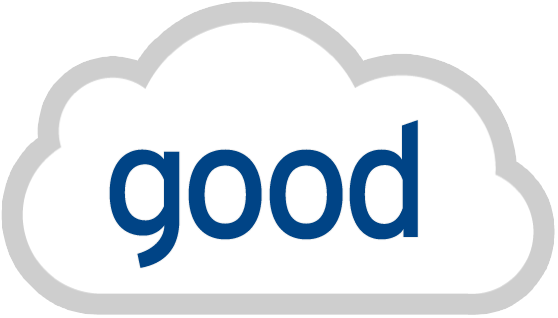
<style>
.page{position:relative;width:558px;height:318px;background:#ffffff}
.page>*{position:absolute;margin:0}
.t1{font:160px "ExpresswayRg-Regular";color:#004486}
</style>
<div class="page">
<p class="t1" style="left:109px;top:120px;width:309px;height:148px">good</p>
</div>
